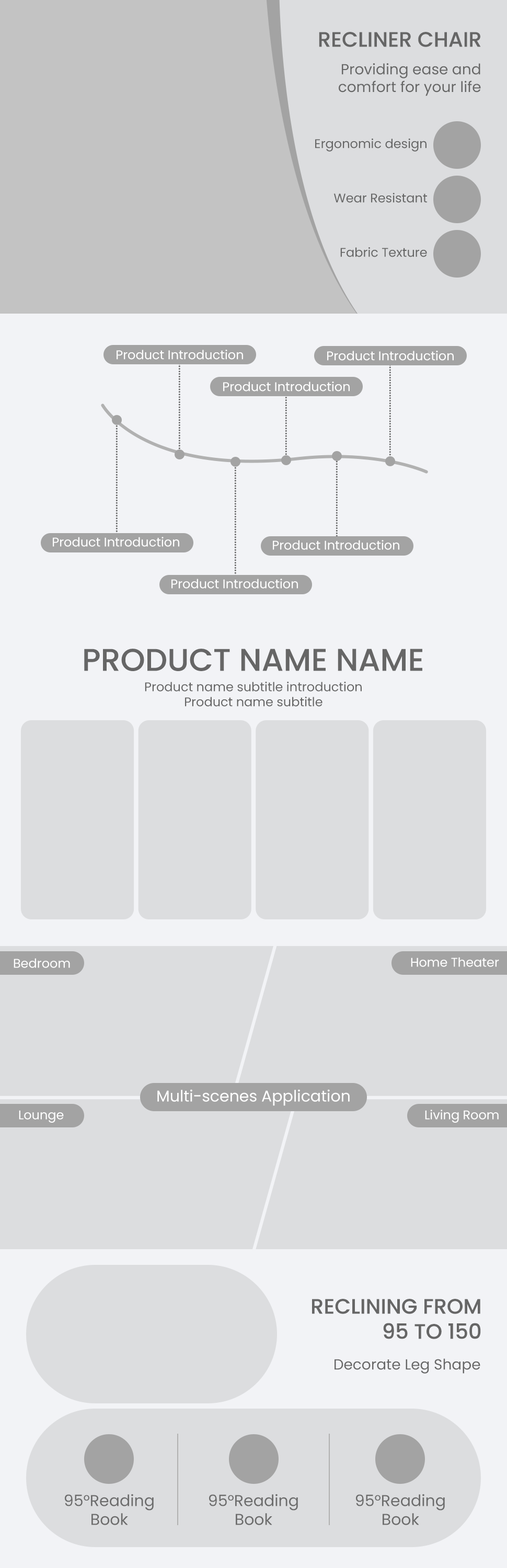
<style>
.page{position:relative;width:507px;height:1568px;background:#dcdddf}
.page>*{position:absolute;margin:0}
.t1{font:20.9px "Poppins-Medium";color:#666666;text-transform:uppercase}
.t2{font:14.6px "Poppins-Regular";color:#666666}
.t3{font:12.5px "Poppins-Regular";color:#666666}
.t4{font:12.5px "Poppins-Regular";color:#ffffff}
.t5{font:10.5px "AdobeHeitiStd-Regular";color:#666666;text-transform:uppercase}
.t6{font:31.4px "Poppins-Medium";color:#666666}
.t7{font:15.7px "Poppins-Regular";color:#ffffff}
.t8{font:15.7px "Poppins-Regular";color:#6c6c6c}
</style>
<div class="page">
<p class="t1" style="left:319px;top:32px;width:162px;height:15px">RECLINER CHAIR</p>
<p class="t2" style="left:339px;top:63px;width:142px;height:33px;text-align:right">Providing ease and<br>comfort for your life</p>
<p class="t3" style="left:315px;top:139px;width:111px;height:13px">Ergonomic design</p>
<p class="t3" style="left:333px;top:193px;width:94px;height:10px">Wear Resistant</p>
<p class="t3" style="left:340px;top:247px;width:87px;height:10px">Fabric Texture</p>
<p class="t4" style="left:117px;top:350px;width:126px;height:10px">Product Introduction</p>
<p class="t4" style="left:327px;top:351px;width:127px;height:10px">Product Introduction</p>
<p class="t5" style="left:178px;top:355px;width:2px;height:97px;rotate:-90deg">......................................</p>
<p class="t5" style="left:389px;top:361px;width:2px;height:97px;rotate:-90deg">......................................</p>
<p class="t4" style="left:223px;top:382px;width:127px;height:9px">Product Introduction</p>
<p class="t5" style="left:285px;top:391px;width:2px;height:66px;rotate:-90deg">..........................</p>
<p class="t5" style="left:116px;top:423px;width:2px;height:114px;rotate:90deg">.............................................</p>
<p class="t5" style="left:336px;top:453px;width:2px;height:84px;rotate:90deg">.................................</p>
<p class="t5" style="left:234px;top:465px;width:2px;height:114px;rotate:90deg">.............................................</p>
<p class="t4" style="left:53px;top:537px;width:126px;height:10px">Product Introduction</p>
<p class="t4" style="left:273px;top:540px;width:126px;height:10px">Product Introduction</p>
<p class="t4" style="left:171px;top:579px;width:127px;height:10px">Product Introduction</p>
<p class="t6" style="left:84px;top:649px;width:338px;height:22px">PRODUCT NAME NAME</p>
<p class="t3" style="left:145px;top:682px;width:217px;height:25px;text-align:center">Product name subtitle introduction<br>Product name subtitle</p>
<p class="t4" style="left:14px;top:958px;width:56px;height:10px">Bedroom</p>
<p class="t4" style="left:411px;top:957px;width:88px;height:10px">Home Theater</p>
<p class="t7" style="left:157px;top:1089px;width:193px;height:17px">Multi-scenes Application</p>
<p class="t4" style="left:425px;top:1110px;width:74px;height:13px">Living Room</p>
<p class="t4" style="left:19px;top:1110px;width:45px;height:13px">Lounge</p>
<p class="t1" style="left:312px;top:1299px;width:169px;height:40px;text-align:right">Reclining from<br>95 to 150</p>
<p class="t2" style="left:335px;top:1358px;width:145px;height:16px">Decorate Leg Shape</p>
<p class="t8" style="left:65px;top:1494px;width:89px;height:31px;text-align:center">95°Reading<br>Book</p>
<p class="t8" style="left:209px;top:1494px;width:89px;height:31px;text-align:center">95°Reading<br>Book</p>
<p class="t8" style="left:356px;top:1494px;width:89px;height:31px;text-align:center">95°Reading<br>Book</p>
</div>
